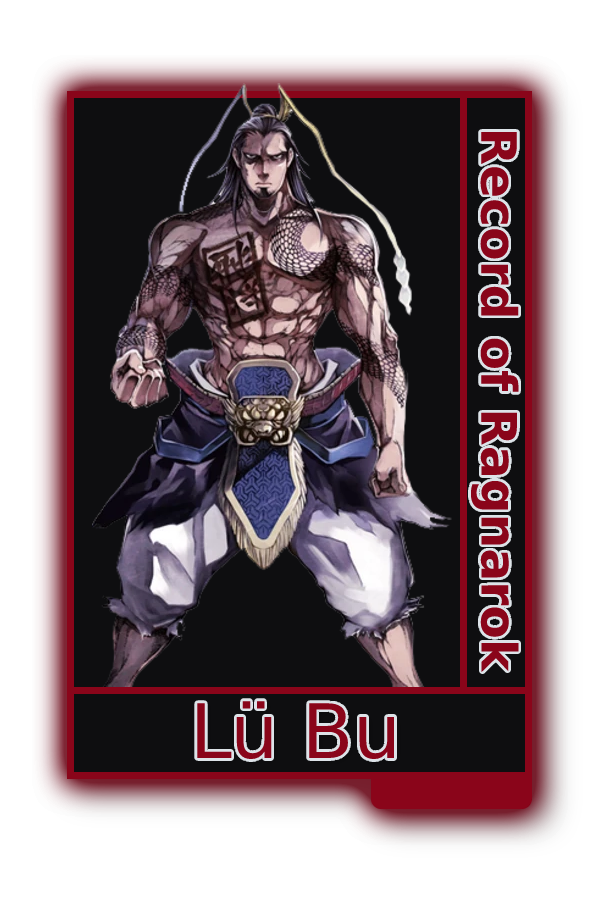
<style>
.page{position:relative;width:600px;height:900px;background:#0e0e10}
.page>*{position:absolute;margin:0}
.t1{font:48.8px "MADETOMMY-Bold";color:#8a051a}
.t2{font:75px "CoolveticaRg-Regular";color:#8a051a}
</style>
<div class="page">
<p class="t1" style="left:470px;top:131px;width:49px;height:542px;rotate:90deg">Record of Ragnarok</p>
<p class="t2" style="left:197px;top:701px;width:197px;height:59px">Lü Bu</p>
</div>
